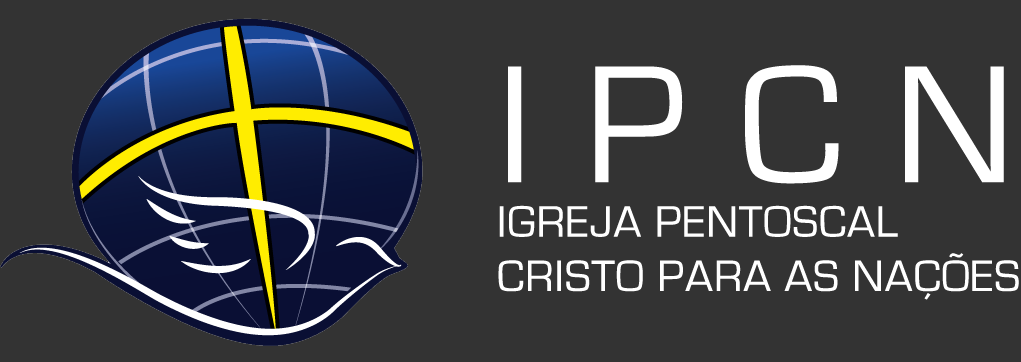
<style>
.page{position:relative;width:1021px;height:362px;background:#333333}
.page>*{position:absolute;margin:0}
.t1{font:45.3px "EurostileRegular";letter-spacing:0.025em;color:#ffffff}
.t2{font:173.4px "EurostileRegular";letter-spacing:0.025em;color:#ffffff}
</style>
<div class="page">
<p class="t1" style="left:498px;top:65px;width:521px;height:235px"><span class="t2">I P C N <br></span>IGREJA PENTOSCAL<br>CRISTO PARA AS NAÇÕES</p>
</div>
